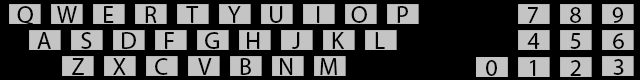
<style>
.page{position:relative;width:640px;height:80px;background:#000000}
.page>*{position:absolute;margin:0}
.t1{font:24px "MyriadPro-Regular";color:#000000}
</style>
<div class="page">
<p class="t1" style="left:17px;top:6px;width:16px;height:19px">Q</p>
<p class="t1" style="left:57px;top:6px;width:20px;height:17px">W</p>
<p class="t1" style="left:104px;top:6px;width:10px;height:17px">E</p>
<p class="t1" style="left:145px;top:6px;width:12px;height:17px">R</p>
<p class="t1" style="left:186px;top:6px;width:13px;height:17px">T</p>
<p class="t1" style="left:228px;top:6px;width:13px;height:17px">Y</p>
<p class="t1" style="left:270px;top:6px;width:13px;height:17px">U</p>
<p class="t1" style="left:317px;top:6px;width:3px;height:17px">I</p>
<p class="t1" style="left:351px;top:6px;width:16px;height:17px">O</p>
<p class="t1" style="left:397px;top:6px;width:11px;height:17px">P</p>
<p class="t1" style="left:527px;top:7px;width:11px;height:16px">7</p>
<p class="t1" style="left:570px;top:7px;width:11px;height:16px">8</p>
<p class="t1" style="left:612px;top:7px;width:11px;height:16px">9</p>
<p class="t1" style="left:37px;top:32px;width:14px;height:17px">A</p>
<p class="t1" style="left:81px;top:32px;width:11px;height:17px">S</p>
<p class="t1" style="left:122px;top:32px;width:14px;height:17px">D</p>
<p class="t1" style="left:165px;top:32px;width:9px;height:17px">F</p>
<p class="t1" style="left:205px;top:32px;width:14px;height:17px">G</p>
<p class="t1" style="left:247px;top:32px;width:13px;height:17px">H</p>
<p class="t1" style="left:292px;top:32px;width:8px;height:17px">J</p>
<p class="t1" style="left:332px;top:32px;width:13px;height:17px">K</p>
<p class="t1" style="left:375px;top:32px;width:10px;height:17px">L</p>
<p class="t1" style="left:527px;top:33px;width:13px;height:16px">4</p>
<p class="t1" style="left:570px;top:33px;width:11px;height:16px">5</p>
<p class="t1" style="left:613px;top:33px;width:11px;height:16px">6</p>
<p class="t1" style="left:72px;top:58px;width:12px;height:17px">Z</p>
<p class="t1" style="left:113px;top:58px;width:13px;height:17px">X</p>
<p class="t1" style="left:155px;top:58px;width:13px;height:17px">C</p>
<p class="t1" style="left:198px;top:58px;width:14px;height:17px">V</p>
<p class="t1" style="left:240px;top:58px;width:11px;height:17px">B</p>
<p class="t1" style="left:280px;top:58px;width:13px;height:17px">N</p>
<p class="t1" style="left:320px;top:58px;width:17px;height:17px">M</p>
<p class="t1" style="left:486px;top:60px;width:11px;height:16px">0</p>
<p class="t1" style="left:530px;top:60px;width:6px;height:16px">1</p>
<p class="t1" style="left:570px;top:60px;width:11px;height:16px">2</p>
<p class="t1" style="left:613px;top:59px;width:11px;height:16px">3</p>
</div>
